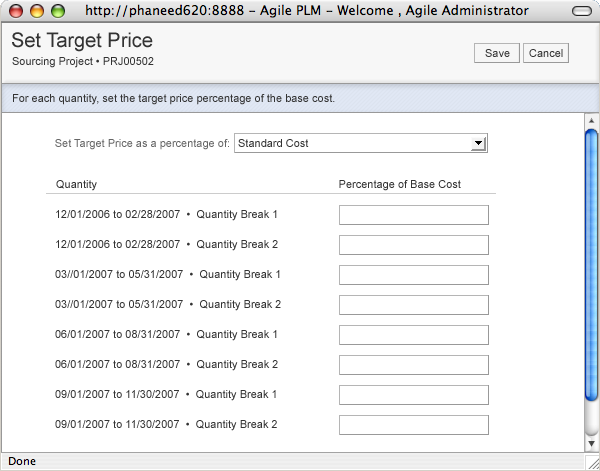
<style>
.page{position:relative;width:600px;height:471px;background:#ffffff}
.page>*{position:absolute;margin:0}
.t1{font:20px "ArialMT";color:#333333}
.t2{font:11px "ArialMT";color:#333333}
.t3{font:11px "ArialMT";color:#666666}
.t4{font:11px/30px "ArialMT";color:#333333}
</style>
<div class="page">
<p class="t1" style="left:12px;top:32px;width:141px;height:20px">Set Target Price</p>
<p class="t2" style="left:485px;top:49px;width:25px;height:8px">Save</p>
<p class="t2" style="left:529px;top:49px;width:34px;height:8px">Cancel</p>
<p class="t2" style="left:12px;top:57px;width:142px;height:11px">Sourcing Project • PRJ00502</p>
<p class="t2" style="left:13px;top:94px;width:322px;height:11px">For each quantity, set the target price percentage of the base cost.</p>
<p class="t3" style="left:55px;top:139px;width:174px;height:11px">Set Target Price as a percentage of:</p>
<p class="t2" style="left:238px;top:139px;width:71px;height:8px">Standard Cost</p>
<p class="t2" style="left:56px;top:180px;width:405px;height:11px">Quantity                                  Percentage of Base Cost</p>
<p class="t4" style="left:55px;top:210px;width:226px;height:221px">12/01/2006 to 02/28/2007  •  Quantity Break 1<br>12/01/2006 to 02/28/2007  •  Quantity Break 2<br>03//01/2007 to 05/31/2007  •  Quantity Break 1<br>03//01/2007 to 05/31/2007  •  Quantity Break 2<br>06/01/2007 to 08/31/2007  •  Quantity Break 1<br>06/01/2007 to 08/31/2007  •  Quantity Break 2<br>09/01/2007 to 11/30/2007  •  Quantity Break 1<br>09/01/2007 to 11/30/2007  •  Quantity Break 2</p>
</div>
